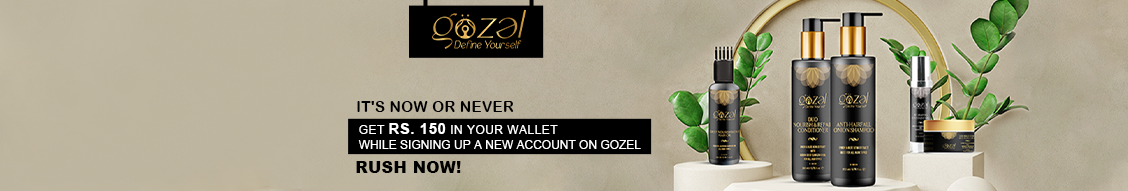
<style>
.page{position:relative;width:1128px;height:191px}
.page>*{position:absolute;margin:0}
.t1{font:15px "ArialRoundedMTBold";letter-spacing:0.025em;color:#000000;text-transform:uppercase}
.t2{font:11.8px/17.5px "ArialMT";letter-spacing:0.01em;color:#ffffff;text-transform:uppercase}
.t3{font:11.8px/17.5px "ArialMT";letter-spacing:0.05em;color:#ffffff;text-transform:uppercase}
.t4{font:14.6px/17.5px "Arial-BoldMT";letter-spacing:0.05em;color:#ffffff;text-transform:uppercase}
.t5{font:15.8px "Arial-Black";letter-spacing:0.025em;color:#000000;text-transform:uppercase}
</style>
<div class="page">
<p class="t1" style="left:357px;top:101px;width:157px;height:11px">IT'S NOW OR NEVER</p>
<p class="t2" style="left:358px;top:123px;width:283px;height:26px"><span class="t3">Get </span><span class="t4">Rs. 150</span><span class="t3"> in your wallet <br></span>while signing up a new account on Gozel</p>
<p class="t5" style="left:356px;top:161px;width:105px;height:12px">RUSH NOW!</p>
</div>
